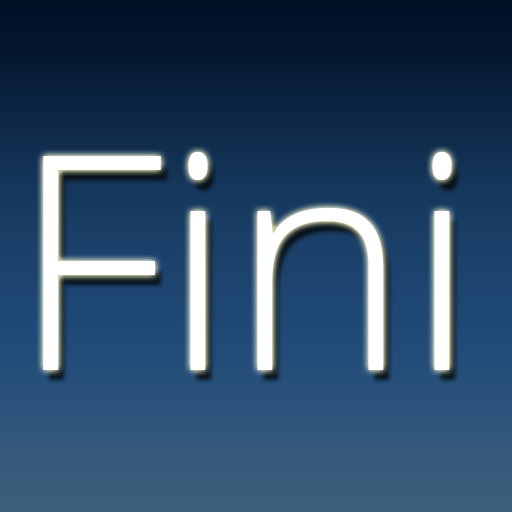
<style>
.page{position:relative;width:512px;height:512px}
.page>*{position:absolute;margin:0}
.t1{font:300px "OpenSans-Light";color:#ffffff}
</style>
<div class="page">
<p class="t1" style="left:43px;top:152px;width:409px;height:218px">Fini</p>
</div>
